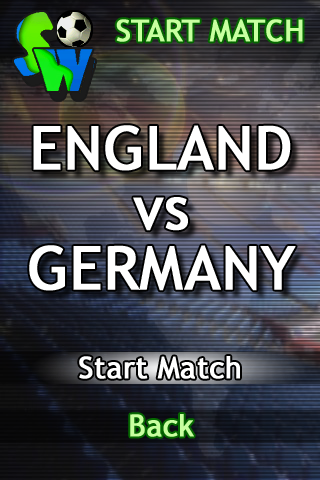
<style>
.page{position:relative;width:320px;height:480px}
.page>*{position:absolute;margin:0}
.t1{font:30px "TrebuchetMS";color:#c8ffa0;font-weight:bold}
.t2{font:60px/60px "TrebuchetMS";color:#ffffff;font-weight:bold}
.t3{font:30px "TrebuchetMS";color:#ffffff;font-weight:bold}
</style>
<div class="page">
<p class="t1" style="left:116px;top:19px;width:187px;height:23px">START MATCH</p>
<p class="t2" style="left:29px;top:125px;width:267px;height:166px;text-align:center">ENGLAND<br>vs<br>GERMANY</p>
<p class="t3" style="left:79px;top:356px;width:161px;height:23px">Start Match</p>
<p class="t1" style="left:130px;top:414px;width:64px;height:23px">Back</p>
</div>
